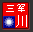
<style>
.page{position:relative;width:33px;height:32px;background:#f20000}
.page>*{position:absolute;margin:0}
.t1{font:10.4px "SimSun";color:#ffffff}
.t2{font:11.7px "SimSun";color:#ffffff}
</style>
<div class="page">
<p class="t1" style="left:6px;top:4px;width:19px;height:8px">三军</p>
<p class="t2" style="left:16px;top:15px;width:11px;height:12px">川</p>
</div>
